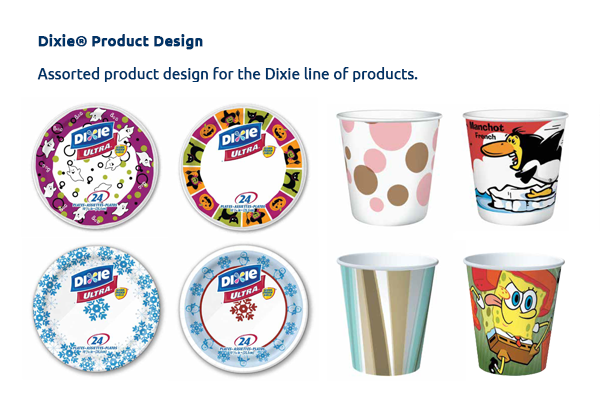
<style>
.page{position:relative;width:600px;height:400px;background:#ffffff}
.page>*{position:absolute;margin:0}
.t1{font:25px/33.3px "Ubuntu";color:#003366;font-weight:bold}
.t2{font:25px/37.5px "Ubuntu-Bold";color:#003366;font-weight:bold}
</style>
<div class="page">
<p class="t1" style="left:37px;top:34px;width:381px;height:48px"><span class="t2">Dixie® Product Design<br></span>Assorted product design for the Dixie line of products.</p>
</div>
